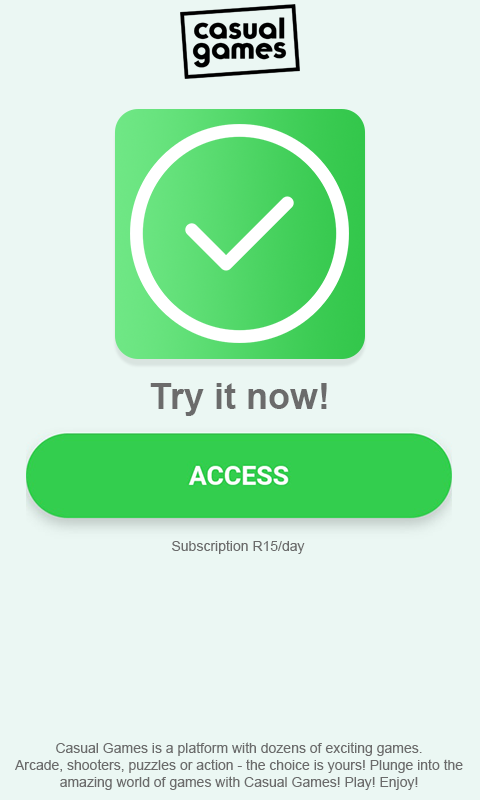
<style>
.page{position:relative;width:480px;height:800px;background:#ebf7f3}
.page>*{position:absolute;margin:0}
.t1{font:36px "Arial-BoldMT";color:#6b6b6b}
.t2{font:14px "ArialMT";color:#6b6b6b}
</style>
<div class="page">
<p class="t1" style="left:150px;top:383px;width:177px;height:33px">Try it now!</p>
<p class="t2" style="left:172px;top:540px;width:133px;height:14px">Subscription R15/day</p>
<p class="t2" style="left:15px;top:742px;width:448px;height:48px;text-align:center">Casual Games is a platform with dozens of exciting games.<br>Arcade, shooters, puzzles or action - the choice is yours! Plunge into the<br>amazing world of games with Casual Games! Play! Enjoy!</p>
</div>
